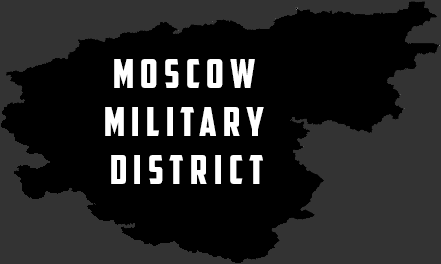
<style>
.page{position:relative;width:441px;height:264px;background:#000000}
.page>*{position:absolute;margin:0}
.t1{font:40px "AmericanCaptain";letter-spacing:0.16em;color:#ffffff}
</style>
<div class="page">
<p class="t1" style="left:105px;top:59px;width:159px;height:125px;text-align:center">Moscow <br>military <br>district</p>
</div>
